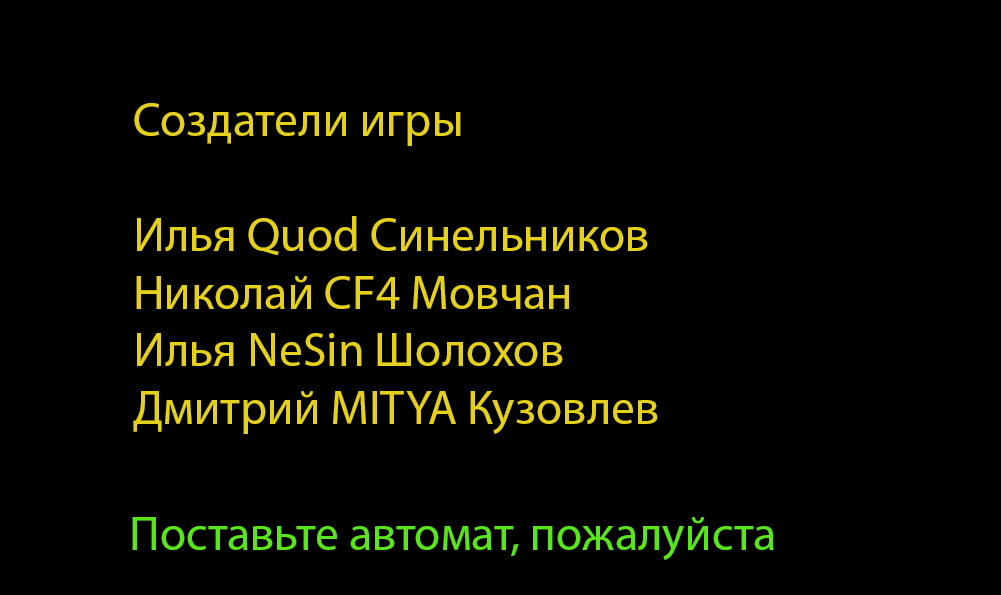
<style>
.page{position:relative;width:1001px;height:595px;background:#000000}
.page>*{position:absolute;margin:0}
.t1{font:48px "MyriadPro-Regular";color:#e5d01c}
.t2{font:48px "MyriadPro-Regular";color:#59e51c}
</style>
<div class="page">
<p class="t1" style="left:133px;top:103px;width:525px;height:331px">Создатели игры<br><br>Илья Quod Синельников<br>Николай CF4 Мовчан<br>Илья NeSin Шолохов<br>Дмитрий MITYA Кузовлев</p>
<p class="t2" style="left:132px;top:517px;width:642px;height:43px">Поставьте автомат, пожалуйста</p>
</div>
